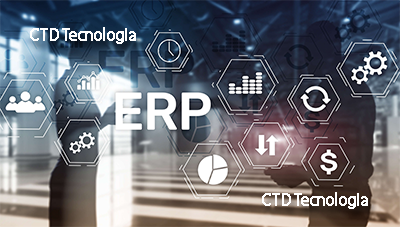
<style>
.page{position:relative;width:400px;height:227px}
.page>*{position:absolute;margin:0}
.t1{font:17.2px "MyriadPro-Regular";letter-spacing:-0.04em;color:#ffffff;font-weight:bold}
</style>
<div class="page">
<p class="t1" style="left:30px;top:27px;width:106px;height:17px">CTD Tecnologia</p>
<p class="t1" style="left:262px;top:192px;width:106px;height:17px">CTD Tecnologia</p>
</div>
